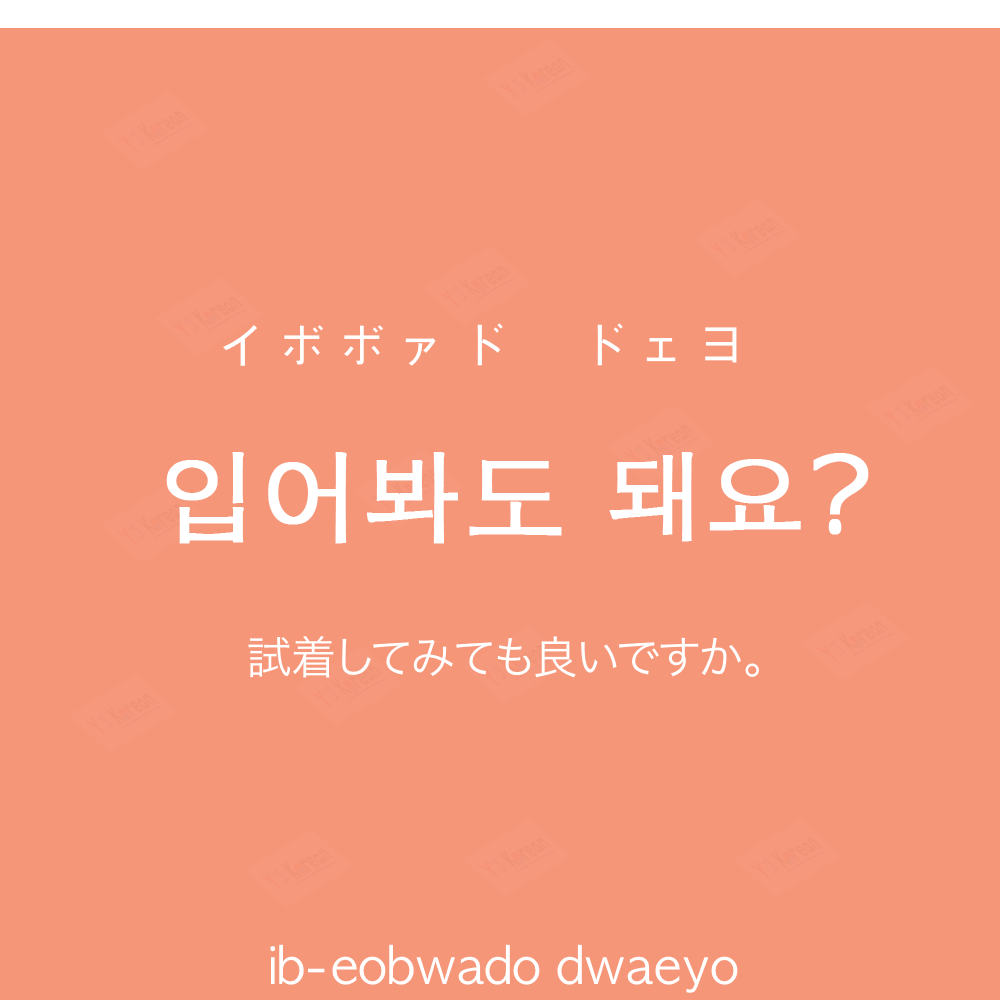
<style>
.page{position:relative;width:1000px;height:1000px;background:#f69679}
.page>*{position:absolute;margin:0}
.t1{font:60px "AppleGothic";color:#ffffff}
.t2{font:100px "AppleGothic";color:#ffffff;font-weight:bold}
.t3{font:45px "HiraKakuProN-W3";color:#ffffff}
.t4{font:50px "AppleGothic";color:#ffffff}
</style>
<div class="page">
<p class="t1" style="left:223px;top:323px;width:514px;height:43px">イボボァド　ドェヨ</p>
<p class="t2" style="left:166px;top:452px;width:703px;height:92px">입어봐도 돼요?</p>
<p class="t3" style="left:248px;top:636px;width:511px;height:42px">試着してみても良いですか。</p>
<p class="t4" style="left:270px;top:944px;width:468px;height:49px">ib-eobwado dwaeyo</p>
</div>
